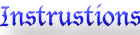
<style>
.page{position:relative;width:140px;height:35px;background:#ffffff}
.page>*{position:absolute;margin:0}
.t1{font:26.9px "LucidaBlackletter"}
</style>
<div class="page">
<p class="t1" style="left:0px;top:3px;width:141px;height:24px">Instrustions</p>
</div>
